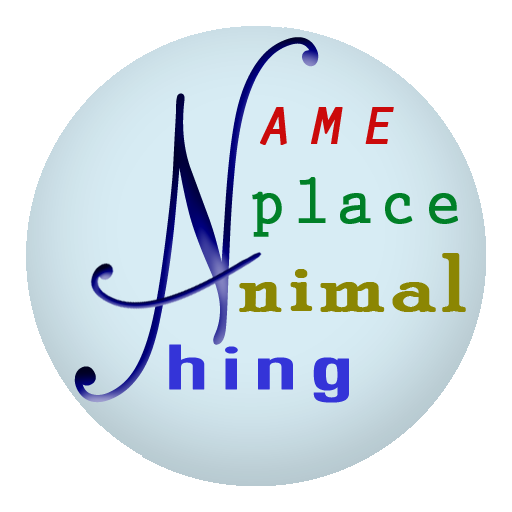
<style>
.page{position:relative;width:512px;height:512px;background:#ffffff}
.page>*{position:absolute;margin:0}
.t1{font:422.8px "PalaceScriptMT";font-weight:bold;scale:0.86 1}
.t2{font:68.6px "OratorStd-Slanted";letter-spacing:0.22em;color:#cb0a0a;font-weight:bold;scale:0.88 1}
.t3{font:68.6px "PrestigeEliteStd-Bd";letter-spacing:0.1em;color:#008027;font-weight:bold;scale:0.88 1}
.t4{font:82.3px "PoorRichard-Regular";letter-spacing:0.04em;color:#8b8603;font-weight:bold;scale:1.16 1}
.t5{font:68.6px "TwCenMT-Condensed";letter-spacing:0.04em;color:#3434d8;font-weight:bold;scale:1.9 1}
</style>
<div class="page">
<p class="t1" style="left:74px;top:37px;width:245px;height:366px;rotate:-27deg">N</p>
<p class="t2" style="left:260px;top:107px;width:134px;height:38px">ame</p>
<p class="t3" style="left:252px;top:177px;width:206px;height:60px">place</p>
<p class="t4" style="left:239px;top:253px;width:227px;height:59px">nimal</p>
<p class="t5" style="left:169px;top:344px;width:180px;height:59px">hing</p>
</div>
